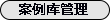
<style>
.page{position:relative;width:110px;height:20px;background:#e5e5e5}
.page>*{position:absolute;margin:0}
.t1{font:13.9px "MicrosoftYaHei-Bold";color:#02010a}
</style>
<div class="page">
<p class="t1" style="left:19px;top:3px;width:69px;height:12px">案例库管理</p>
</div>
